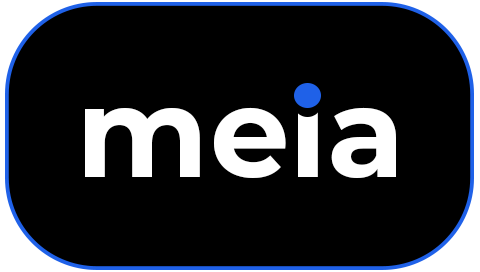
<style>
.page{position:relative;width:480px;height:272px;background:#000000}
.page>*{position:absolute;margin:0}
.t1{font:126.2px "Montserrat-Bold";color:#ffffff}
</style>
<div class="page">
<p class="t1" style="left:85px;top:78px;width:311px;height:100px">meia</p>
</div>
